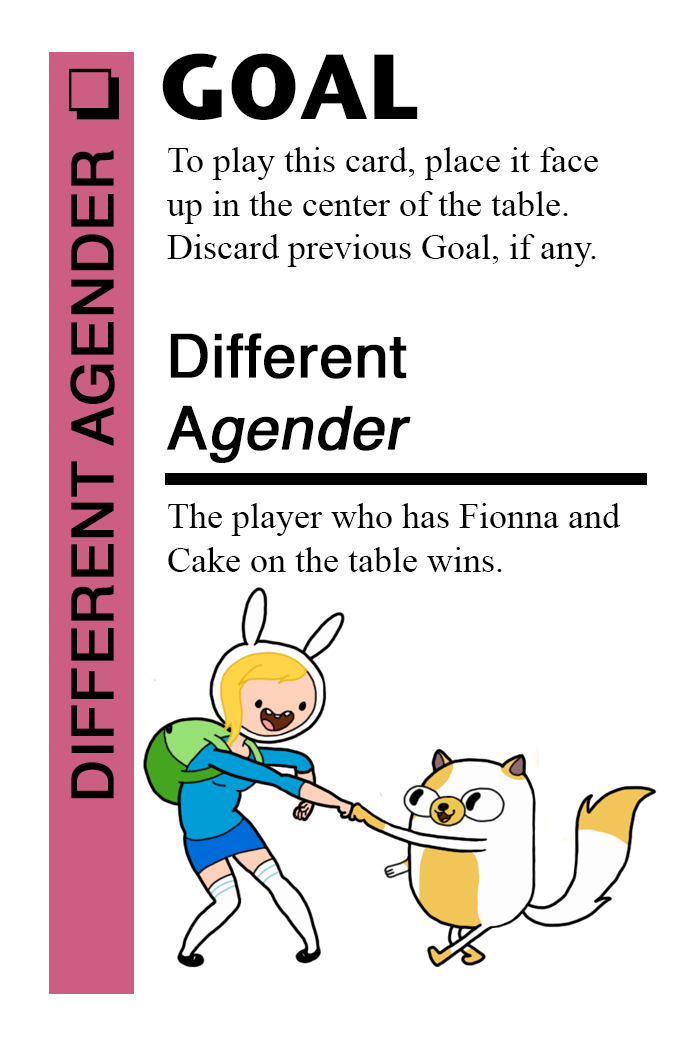
<style>
.page{position:relative;width:700px;height:1042px;background:#ffffff}
.page>*{position:absolute;margin:0}
.t1{font:92px "StoneSansITC-Bold";color:#000000}
.t2{font:72px "MS-Gothic";color:#000000}
.t3{font:58px "Helvetica";color:#000000;font-weight:bold}
.t4{font:36px "TimesNewRomanPSMT";color:#000000}
.t5{font:60px "Helvetica";color:#000000;font-weight:bold}
.t6{font:60px "Helvetica";color:#000000;font-weight:bold;font-style:italic}
</style>
<div class="page">
<p class="t1" style="left:162px;top:53px;width:256px;height:67px">GOAL</p>
<p class="t2" style="left:69px;top:68px;width:50px;height:52px">❏</p>
<p class="t3" style="left:70px;top:150px;width:45px;height:649px;rotate:-90deg">DIFFERENT AGENDER</p>
<p class="t4" style="left:167px;top:147px;width:431px;height:120px">To play this card, place it face<br>up in the center of the table.<br>Discard previous Goal, if any.</p>
<p class="t5" style="left:167px;top:333px;width:244px;height:130px">Different <br>A<span class="t6">gender</span></p>
<p class="t4" style="left:168px;top:503px;width:453px;height:69px">The player who has Fionna and<br>Cake on the table wins.</p>
</div>
